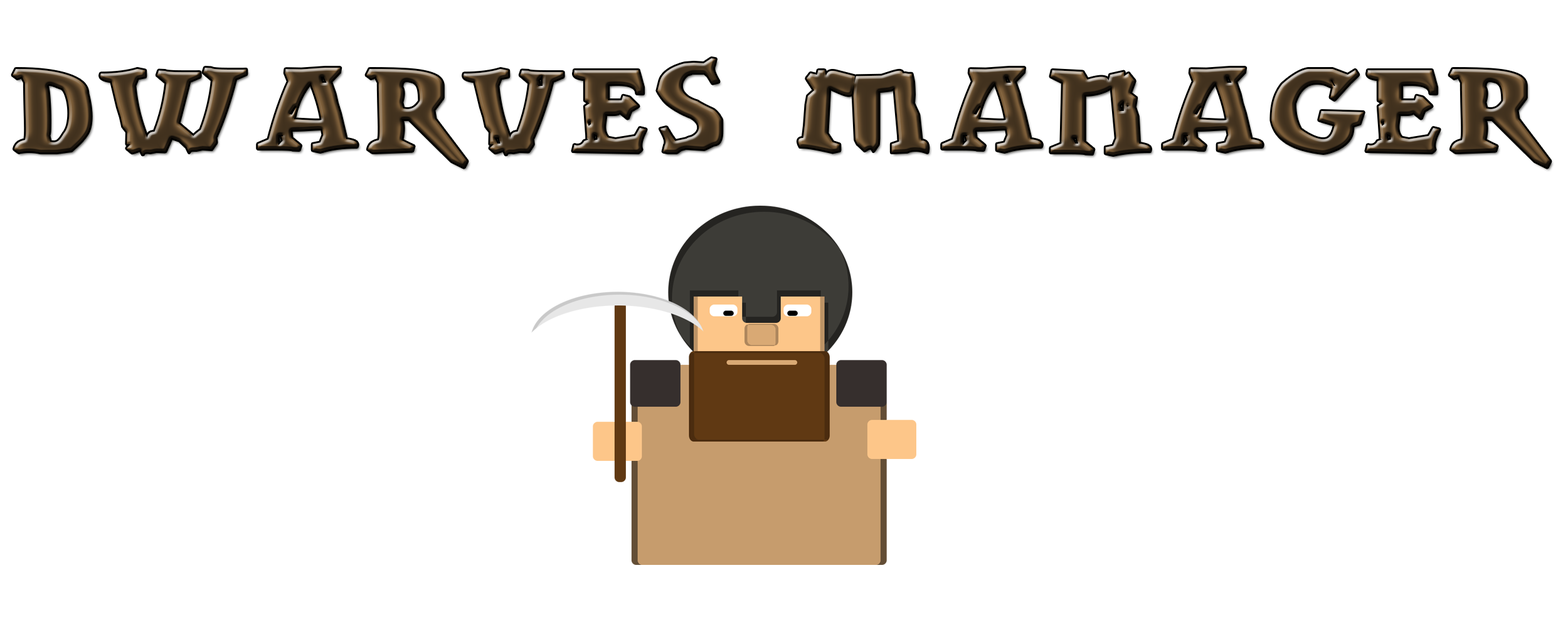
<style>
.page{position:relative;width:1568px;height:627px;background:#ffffff}
.page>*{position:absolute;margin:0}
.t1{font:156.8px "drwnstcr"}
</style>
<div class="page">
<p class="t1" style="left:13px;top:58px;width:1537px;height:109px">Dwarves Manager</p>
</div>
